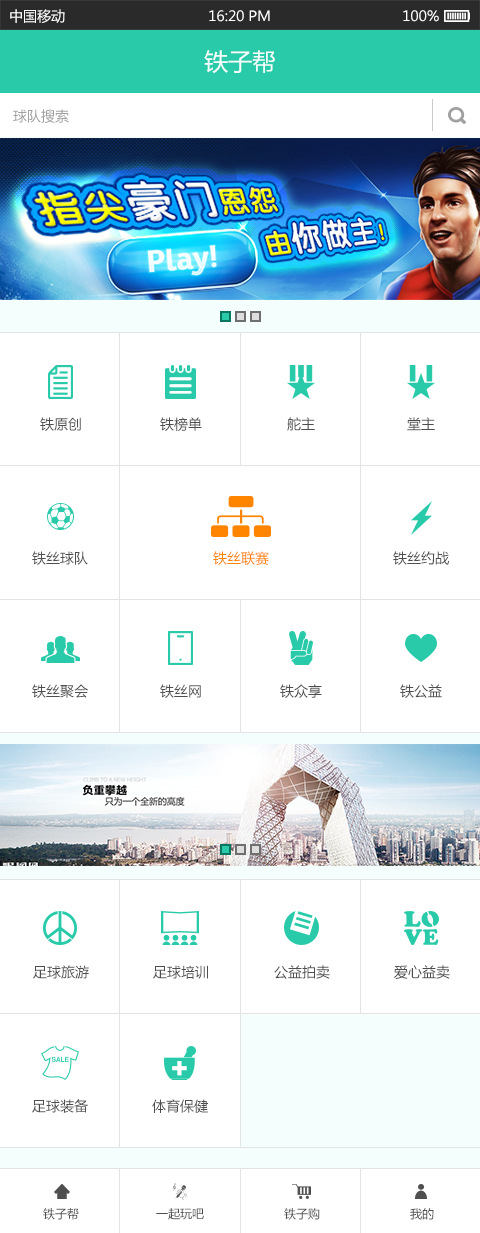
<style>
.page{position:relative;width:480px;height:1233px;background:#ffffff}
.page>*{position:absolute;margin:0}
.t1{font:14px "MicrosoftYaHei";color:#ffffff}
.t2{font:24px "MicrosoftYaHei";color:#f4fffd}
.t3{font:14px "MicrosoftYaHei";color:#a0a0a0}
.t4{font:14px "MicrosoftYaHei";color:#4e4e4e}
.t5{font:14px "MicrosoftYaHei";color:#ff8400}
.t6{font:12px "MicrosoftYaHei";color:#4e4e4e}
</style>
<div class="page">
<p class="t1" style="left:10px;top:9px;width:55px;height:14px">中国移动</p>
<p class="t1" style="left:209px;top:10px;width:61px;height:12px">16:20 PM</p>
<p class="t1" style="left:403px;top:10px;width:36px;height:12px">100%</p>
<p class="t2" style="left:204px;top:50px;width:71px;height:24px">铁子帮</p>
<p class="t3" style="left:13px;top:109px;width:56px;height:14px">球队搜索</p>
<p class="t4" style="left:40px;top:417px;width:41px;height:14px">铁原创</p>
<p class="t4" style="left:160px;top:417px;width:42px;height:14px">铁榜单</p>
<p class="t4" style="left:287px;top:417px;width:28px;height:14px">舵主</p>
<p class="t4" style="left:407px;top:417px;width:28px;height:14px">堂主</p>
<p class="t4" style="left:32px;top:551px;width:56px;height:14px">铁丝球队</p>
<p class="t5" style="left:213px;top:551px;width:56px;height:14px">铁丝联赛</p>
<p class="t4" style="left:393px;top:551px;width:56px;height:14px">铁丝约战</p>
<p class="t4" style="left:32px;top:684px;width:56px;height:14px">铁丝聚会</p>
<p class="t4" style="left:160px;top:684px;width:41px;height:14px">铁丝网</p>
<p class="t4" style="left:280px;top:684px;width:42px;height:14px">铁众享</p>
<p class="t4" style="left:400px;top:684px;width:42px;height:14px">铁公益</p>
<p class="t4" style="left:33px;top:965px;width:56px;height:14px">足球旅游</p>
<p class="t4" style="left:153px;top:965px;width:55px;height:14px">足球培训</p>
<p class="t4" style="left:274px;top:965px;width:56px;height:14px">公益拍卖</p>
<p class="t4" style="left:394px;top:965px;width:56px;height:14px">爱心益卖</p>
<p class="t4" style="left:32px;top:1099px;width:56px;height:14px">足球装备</p>
<p class="t4" style="left:152px;top:1099px;width:56px;height:14px">体育保健</p>
<p class="t6" style="left:43px;top:1208px;width:36px;height:12px">铁子帮</p>
<p class="t6" style="left:156px;top:1208px;width:48px;height:12px">一起玩吧</p>
<p class="t6" style="left:284px;top:1208px;width:36px;height:12px">铁子购</p>
<p class="t6" style="left:410px;top:1208px;width:24px;height:12px">我的</p>
</div>
